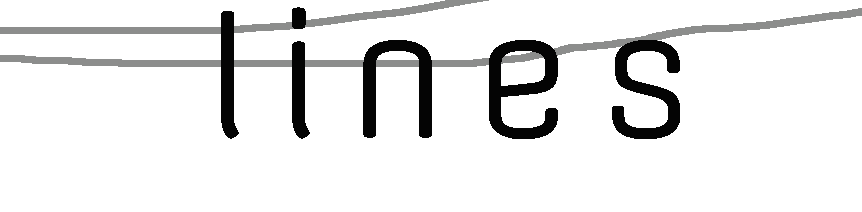
<style>
.page{position:relative;width:862px;height:212px;background:#ffffff}
.page>*{position:absolute;margin:0}
.t1{font:158px "Offside-Regular";letter-spacing:0.15em;color:#040404}
</style>
<div class="page">
<p class="t1" style="left:221px;top:7px;width:459px;height:132px">lines</p>
</div>
